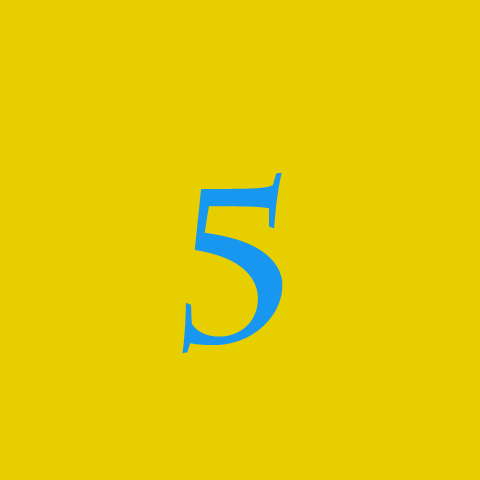
<style>
.page{position:relative;width:480px;height:480px;background:#e6ce00}
.page>*{position:absolute;margin:0}
.t1{font:218px "CharlemagneStd-Bold";color:#1897f0}
</style>
<div class="page">
<p class="t1" style="left:182px;top:172px;width:101px;height:182px">5</p>
</div>
